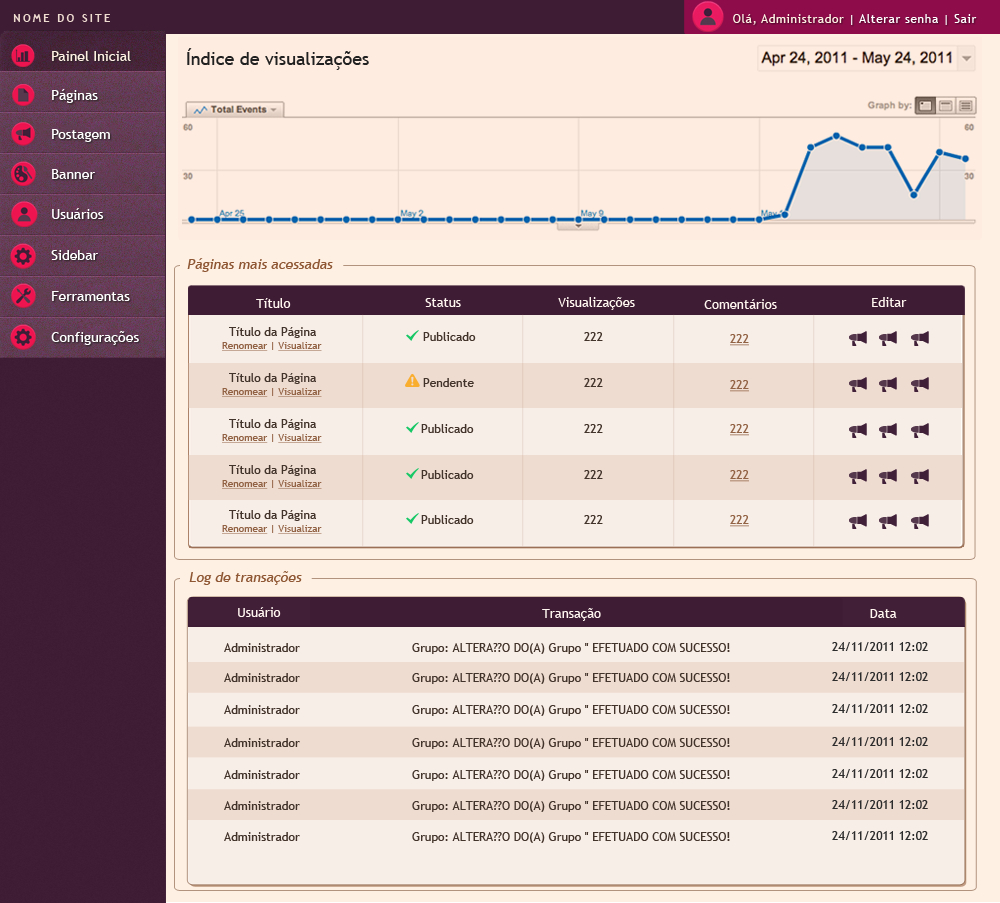
<style>
.page{position:relative;width:1000px;height:903px;background:#f8eee8}
.page>*{position:absolute;margin:0}
.t1{font:11px "TrebuchetMS-Bold";letter-spacing:0.2em;color:#efdcd0;text-transform:uppercase}
.t2{font:12px "TrebuchetMS";letter-spacing:0.05em;color:#ffffff}
.t3{font:12px "TrebuchetMS";letter-spacing:0.05em;color:#fef1e4}
.t4{font:14px "TrebuchetMS";color:#fef1e4}
.t5{font:18px "TrebuchetMS";color:#212121}
.t6{font:14px "TrebuchetMS";color:#ffffff}
.t7{font:14px "TrebuchetMS";color:#8f5734;font-style:italic}
.t8{font:13px "TrebuchetMS";color:#fff6f0}
.t9{font:12px "TrebuchetMS";color:#43342b}
.t10{font:10px "TrebuchetMS";color:#926244;text-decoration:underline}
.t11{font:10px "TrebuchetMS";color:#926244}
.t12{font:12px "TrebuchetMS";color:#926244;text-decoration:underline}
.t13{font:12px "TrebuchetMS";color:#2c2c2c}
</style>
<div class="page">
<p class="t1" style="left:13px;top:14px;width:97px;height:8px">Nome do site</p>
<p class="t2" style="left:733px;top:14px;width:244px;height:11px"><span class="t3">Olá, Administrador </span>| Alterar senha | Sair</p>
<p class="t4" style="left:52px;top:51px;width:79px;height:10px">Painel Inicial</p>
<p class="t5" style="left:187px;top:48px;width:182px;height:22px">Índice de visualizações</p>
<p class="t6" style="left:52px;top:89px;width:46px;height:14px">Páginas</p>
<p class="t6" style="left:52px;top:129px;width:58px;height:13px">Postagem</p>
<p class="t6" style="left:52px;top:169px;width:43px;height:10px">Banner</p>
<p class="t6" style="left:52px;top:208px;width:52px;height:11px">Usuários</p>
<p class="t6" style="left:51px;top:250px;width:47px;height:10px">Sidebar</p>
<p class="t7" style="left:187px;top:258px;width:146px;height:14px">Páginas mais acessadas</p>
<p class="t6" style="left:52px;top:291px;width:78px;height:10px">Ferramentas</p>
<p class="t8" style="left:256px;top:298px;width:35px;height:10px">Título</p>
<p class="t8" style="left:425px;top:298px;width:36px;height:9px">Status</p>
<p class="t8" style="left:558px;top:297px;width:77px;height:13px">Visualizações</p>
<p class="t8" style="left:704px;top:299px;width:73px;height:10px">Comentários</p>
<p class="t8" style="left:872px;top:297px;width:35px;height:10px">Editar</p>
<p class="t9" style="left:229px;top:327px;width:87px;height:11px">Título da Página</p>
<p class="t6" style="left:51px;top:331px;width:88px;height:14px">Configurações</p>
<p class="t10" style="left:222px;top:342px;width:100px;height:9px">Renomear<span class="t11"> | </span>Visualizar</p>
<p class="t9" style="left:423px;top:332px;width:53px;height:9px">Publicado</p>
<p class="t9" style="left:584px;top:332px;width:19px;height:9px">222</p>
<p class="t12" style="left:730px;top:334px;width:19px;height:12px">222</p>
<p class="t9" style="left:229px;top:373px;width:87px;height:11px">Título da Página</p>
<p class="t10" style="left:222px;top:388px;width:100px;height:9px">Renomear<span class="t11"> | </span>Visualizar</p>
<p class="t9" style="left:423px;top:378px;width:51px;height:9px">Pendente</p>
<p class="t9" style="left:584px;top:378px;width:19px;height:9px">222</p>
<p class="t12" style="left:730px;top:380px;width:19px;height:12px">222</p>
<p class="t9" style="left:229px;top:419px;width:87px;height:11px">Título da Página</p>
<p class="t9" style="left:421px;top:424px;width:53px;height:9px">Publicado</p>
<p class="t9" style="left:584px;top:424px;width:19px;height:9px">222</p>
<p class="t12" style="left:730px;top:424px;width:19px;height:12px">222</p>
<p class="t10" style="left:222px;top:434px;width:100px;height:9px">Renomear<span class="t11"> | </span>Visualizar</p>
<p class="t9" style="left:229px;top:465px;width:87px;height:11px">Título da Página</p>
<p class="t9" style="left:421px;top:470px;width:53px;height:9px">Publicado</p>
<p class="t9" style="left:584px;top:470px;width:19px;height:9px">222</p>
<p class="t12" style="left:730px;top:470px;width:19px;height:12px">222</p>
<p class="t10" style="left:222px;top:480px;width:100px;height:9px">Renomear<span class="t11"> | </span>Visualizar</p>
<p class="t9" style="left:229px;top:510px;width:87px;height:11px">Título da Página</p>
<p class="t9" style="left:421px;top:515px;width:53px;height:9px">Publicado</p>
<p class="t9" style="left:584px;top:515px;width:19px;height:9px">222</p>
<p class="t12" style="left:730px;top:515px;width:19px;height:12px">222</p>
<p class="t10" style="left:222px;top:525px;width:100px;height:9px">Renomear<span class="t11"> | </span>Visualizar</p>
<p class="t7" style="left:189px;top:571px;width:113px;height:14px">Log de transações</p>
<p class="t8" style="left:238px;top:607px;width:43px;height:10px">Usuário</p>
<p class="t8" style="left:542px;top:608px;width:59px;height:13px">Transação</p>
<p class="t8" style="left:870px;top:609px;width:27px;height:9px">Data</p>
<p class="t9" style="left:224px;top:643px;width:76px;height:9px">Administrador</p>
<p class="t9" style="left:412px;top:643px;width:318px;height:11px">Grupo: ALTERA??O DO(A) Grupo '' EFETUADO COM SUCESSO!</p>
<p class="t13" style="left:832px;top:642px;width:96px;height:9px">24/11/2011 12:02</p>
<p class="t9" style="left:224px;top:673px;width:76px;height:9px">Administrador</p>
<p class="t9" style="left:412px;top:673px;width:318px;height:11px">Grupo: ALTERA??O DO(A) Grupo '' EFETUADO COM SUCESSO!</p>
<p class="t13" style="left:832px;top:672px;width:96px;height:9px">24/11/2011 12:02</p>
<p class="t9" style="left:224px;top:705px;width:76px;height:9px">Administrador</p>
<p class="t9" style="left:412px;top:705px;width:318px;height:11px">Grupo: ALTERA??O DO(A) Grupo '' EFETUADO COM SUCESSO!</p>
<p class="t13" style="left:832px;top:704px;width:96px;height:9px">24/11/2011 12:02</p>
<p class="t13" style="left:832px;top:737px;width:96px;height:9px">24/11/2011 12:02</p>
<p class="t9" style="left:224px;top:738px;width:76px;height:9px">Administrador</p>
<p class="t9" style="left:412px;top:738px;width:318px;height:11px">Grupo: ALTERA??O DO(A) Grupo '' EFETUADO COM SUCESSO!</p>
<p class="t9" style="left:224px;top:770px;width:76px;height:9px">Administrador</p>
<p class="t9" style="left:412px;top:770px;width:318px;height:11px">Grupo: ALTERA??O DO(A) Grupo '' EFETUADO COM SUCESSO!</p>
<p class="t13" style="left:832px;top:769px;width:96px;height:9px">24/11/2011 12:02</p>
<p class="t9" style="left:224px;top:801px;width:76px;height:9px">Administrador</p>
<p class="t9" style="left:412px;top:801px;width:318px;height:11px">Grupo: ALTERA??O DO(A) Grupo '' EFETUADO COM SUCESSO!</p>
<p class="t13" style="left:832px;top:800px;width:96px;height:9px">24/11/2011 12:02</p>
<p class="t9" style="left:224px;top:832px;width:76px;height:9px">Administrador</p>
<p class="t9" style="left:412px;top:832px;width:318px;height:11px">Grupo: ALTERA??O DO(A) Grupo '' EFETUADO COM SUCESSO!</p>
<p class="t13" style="left:832px;top:831px;width:96px;height:9px">24/11/2011 12:02</p>
</div>
